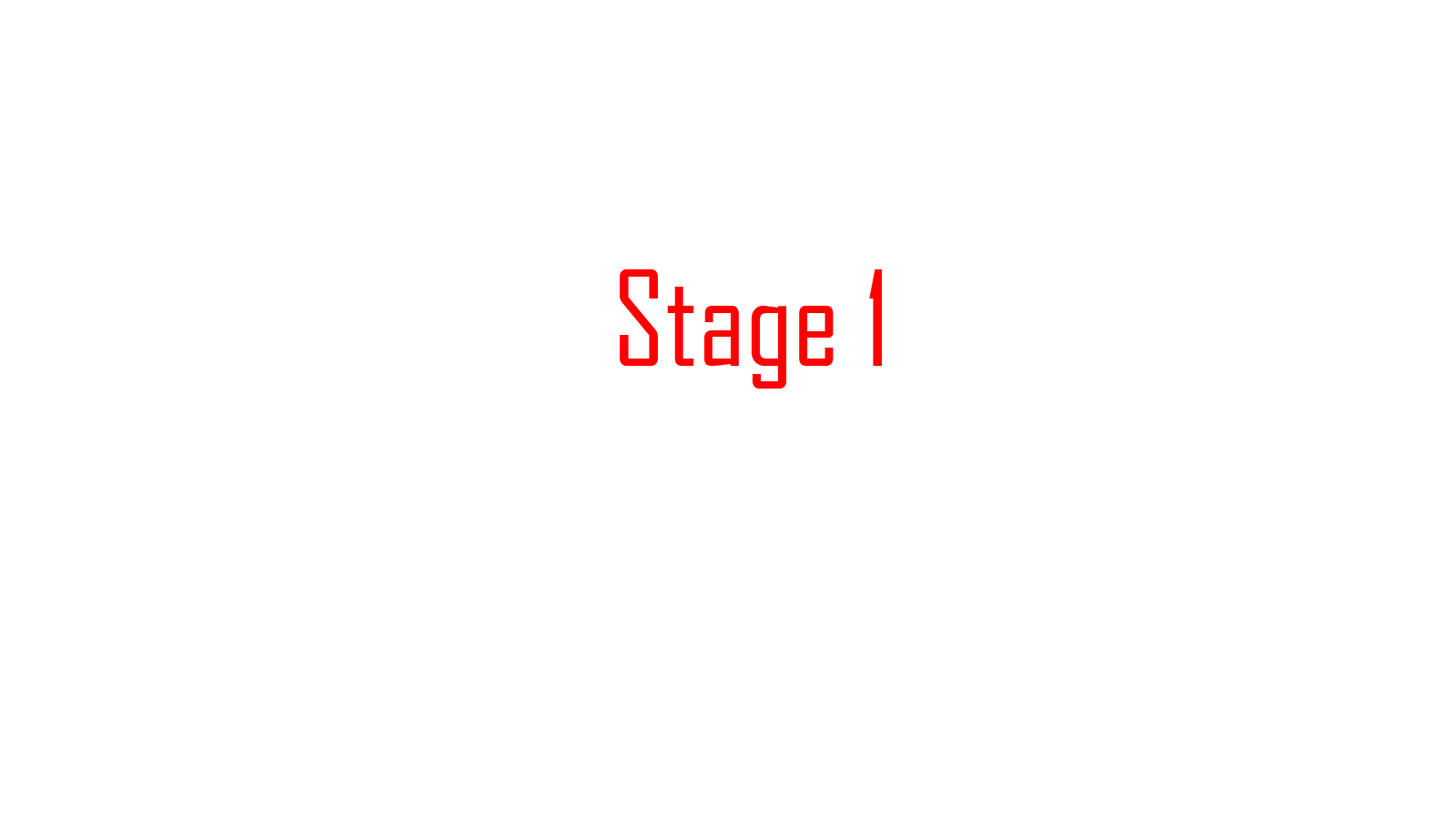
<style>
.page{position:relative;width:1456px;height:819px;background:#ffffff}
.page>*{position:absolute;margin:0}
.t1{font:126.2px "AgencyFB-Reg";color:#ff0000}
</style>
<div class="page">
<p class="t1" style="left:620px;top:269px;width:263px;height:120px">Stage 1</p>
</div>
